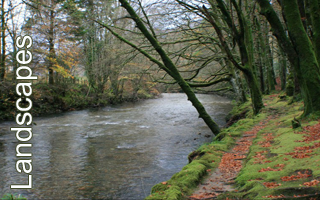
<style>
.page{position:relative;width:320px;height:200px}
.page>*{position:absolute;margin:0}
.t1{font:28.8px "AksharUnicode";color:#fafcfd}
</style>
<div class="page">
<p class="t1" style="left:11px;top:35px;width:27px;height:153px;rotate:-90deg">Landscapes</p>
</div>
